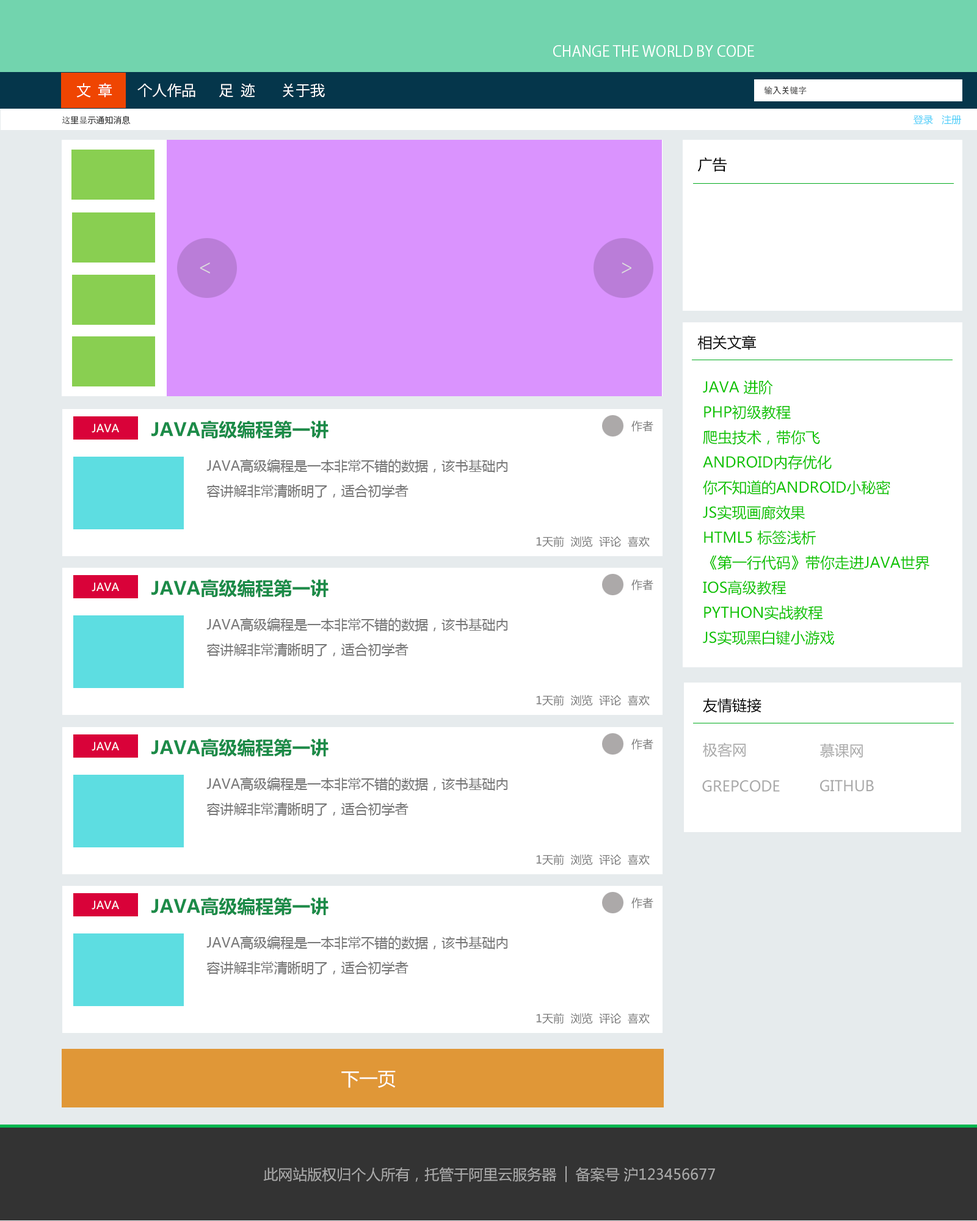
<style>
.page{position:relative;width:977px;height:1221px;background:#ffffff}
.page>*{position:absolute;margin:0}
.t1{font:14.7px "KozGoPr6N-Regular";color:#ffffff;text-transform:uppercase}
.t2{font:8.5px "KozGoPr6N-Regular";color:#333333;text-transform:uppercase}
.t3{font:8.5px "SimSun";color:#333333;text-transform:uppercase}
.t4{font:9.8px "MicrosoftYaHei";color:#49cef9;text-transform:uppercase}
.t5{font:14.7px "MicrosoftYaHei";color:#000000;text-transform:uppercase}
.t6{font:18.3px "KozGoPr6N-Regular";color:#dddddd;text-transform:uppercase}
.t7{font:14.7px/25px "MicrosoftYaHei";color:#0ec300;text-transform:uppercase}
.t8{font:11px "MicrosoftYaHei";color:#ffffff;text-transform:uppercase}
.t9{font:18.3px "MicrosoftYaHei-Bold";color:#1b8b48;text-transform:uppercase}
.t10{font:11px "MicrosoftYaHei";color:#777777;text-transform:uppercase}
.t11{font:13.4px/25px "MicrosoftYaHei";color:#777777;text-transform:uppercase}
.t12{font:14.7px "MicrosoftYaHei";color:#aaaaaa;text-transform:uppercase}
.t13{font:18.3px "MicrosoftYaHei";color:#ffffff;text-transform:uppercase}
</style>
<div class="page">
<p class="t1" style="left:553px;top:45px;width:201px;height:12px">change the world by Code</p>
<p class="t1" style="left:76px;top:83px;width:36px;height:15px">文  章</p>
<p class="t1" style="left:137px;top:84px;width:58px;height:14px">个人作品</p>
<p class="t1" style="left:219px;top:84px;width:36px;height:13px">足  迹</p>
<p class="t1" style="left:283px;top:83px;width:42px;height:14px">关于我</p>
<p class="t2" style="left:764px;top:86px;width:42px;height:9px"><span class="t3">输</span>入关<span class="t3">键字</span></p>
<p class="t2" style="left:62px;top:115px;width:69px;height:10px"><span class="t3">这</span>里<span class="t3">显</span>示通知消息</p>
<p class="t4" style="left:913px;top:115px;width:48px;height:10px">登录   注册</p>
<p class="t5" style="left:698px;top:157px;width:28px;height:15px">广告</p>
<p class="t6" style="left:200px;top:262px;width:10px;height:11px">&lt;</p>
<p class="t6" style="left:621px;top:262px;width:10px;height:11px">&gt;</p>
<p class="t5" style="left:697px;top:335px;width:59px;height:15px">相关文章</p>
<p class="t7" style="left:703px;top:380px;width:227px;height:265px">Java 进阶<br>Php初级教程<br>爬虫技术，带你飞<br>Android内存优化<br>你不知道的Android小秘密<br>Js实现画廊效果<br>HTML5 标签浅析<br>《第一行代码》带你走进java世界<br>IOS高级教程<br>python实战教程<br>JS实现黑白键小游戏</p>
<p class="t8" style="left:92px;top:424px;width:27px;height:9px">java</p>
<p class="t9" style="left:151px;top:421px;width:177px;height:18px">java高级编程第一讲</p>
<p class="t10" style="left:631px;top:421px;width:22px;height:11px">作者</p>
<p class="t11" style="left:206px;top:459px;width:301px;height:39px">java高级编程是一本非常不错的数据，该书基础内<br>容讲解非常清晰明了，适合初学者</p>
<p class="t10" style="left:536px;top:536px;width:114px;height:11px">1天前  浏览  评论  喜欢</p>
<p class="t9" style="left:151px;top:579px;width:177px;height:19px">java高级编程第一讲</p>
<p class="t10" style="left:631px;top:579px;width:22px;height:11px">作者</p>
<p class="t8" style="left:92px;top:582px;width:27px;height:10px">java</p>
<p class="t11" style="left:206px;top:618px;width:301px;height:38px">java高级编程是一本非常不错的数据，该书基础内<br>容讲解非常清晰明了，适合初学者</p>
<p class="t10" style="left:536px;top:695px;width:114px;height:11px">1天前  浏览  评论  喜欢</p>
<p class="t5" style="left:703px;top:698px;width:58px;height:15px">友情链接</p>
<p class="t8" style="left:92px;top:742px;width:27px;height:9px">java</p>
<p class="t9" style="left:151px;top:739px;width:177px;height:18px">java高级编程第一讲</p>
<p class="t10" style="left:631px;top:739px;width:22px;height:11px">作者</p>
<p class="t12" style="left:703px;top:742px;width:42px;height:15px">极客网</p>
<p class="t12" style="left:820px;top:744px;width:43px;height:14px">慕课网</p>
<p class="t11" style="left:206px;top:777px;width:301px;height:39px">java高级编程是一本非常不错的数据，该书基础内<br>容讲解非常清晰明了，适合初学者</p>
<p class="t12" style="left:702px;top:780px;width:78px;height:12px">GrepCode</p>
<p class="t12" style="left:820px;top:780px;width:54px;height:12px">Github</p>
<p class="t10" style="left:536px;top:854px;width:114px;height:11px">1天前  浏览  评论  喜欢</p>
<p class="t8" style="left:92px;top:900px;width:27px;height:10px">java</p>
<p class="t9" style="left:151px;top:897px;width:177px;height:19px">java高级编程第一讲</p>
<p class="t10" style="left:631px;top:897px;width:22px;height:11px">作者</p>
<p class="t11" style="left:206px;top:936px;width:301px;height:38px">java高级编程是一本非常不错的数据，该书基础内<br>容讲解非常清晰明了，适合初学者</p>
<p class="t10" style="left:536px;top:1013px;width:114px;height:11px">1天前  浏览  评论  喜欢</p>
<p class="t13" style="left:341px;top:1071px;width:55px;height:17px">下一页</p>
<p class="t12" style="left:263px;top:1166px;width:452px;height:16px">此网站版权归个人所有，托管于阿里云服务器 │ 备案号 沪123456677</p>
</div>
